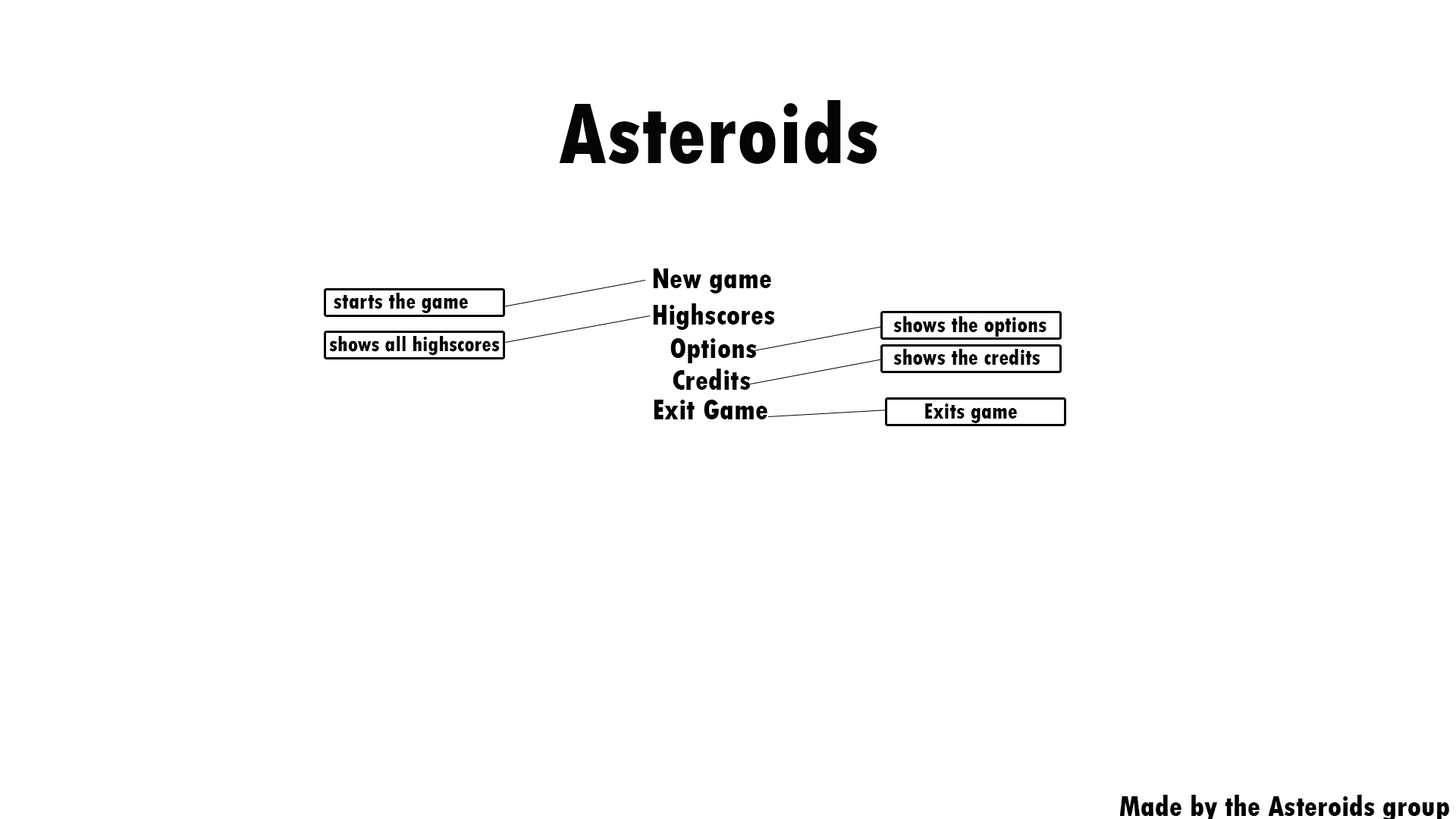
<style>
.page{position:relative;width:1456px;height:819px;background:#ffffff}
.page>*{position:absolute;margin:0}
.t1{font:91px "TwCenMT-CondensedExtraBold";color:#000000}
.t2{font:30.3px "TwCenMT-CondensedExtraBold";color:#000000}
.t3{font:22.7px "TwCenMT-CondensedExtraBold";color:#000000}
.t4{font:22px "TwCenMT-CondensedExtraBold";color:#000000}
</style>
<div class="page">
<p class="t1" style="left:559px;top:100px;width:319px;height:64px">Asteroids</p>
<p class="t2" style="left:653px;top:268px;width:118px;height:25px">New game</p>
<p class="t3" style="left:334px;top:293px;width:134px;height:20px">starts the game</p>
<p class="t2" style="left:653px;top:303px;width:122px;height:27px">Highscores</p>
<p class="t3" style="left:893px;top:316px;width:153px;height:21px">shows the options</p>
<p class="t4" style="left:329px;top:336px;width:171px;height:20px">shows all highscores</p>
<p class="t2" style="left:670px;top:338px;width:87px;height:25px">Options</p>
<p class="t3" style="left:893px;top:349px;width:147px;height:16px">shows the credits</p>
<p class="t2" style="left:673px;top:369px;width:78px;height:21px">Credits</p>
<p class="t2" style="left:654px;top:400px;width:113px;height:19px">Exit Game</p>
<p class="t3" style="left:925px;top:403px;width:92px;height:20px">Exits game</p>
</div>
